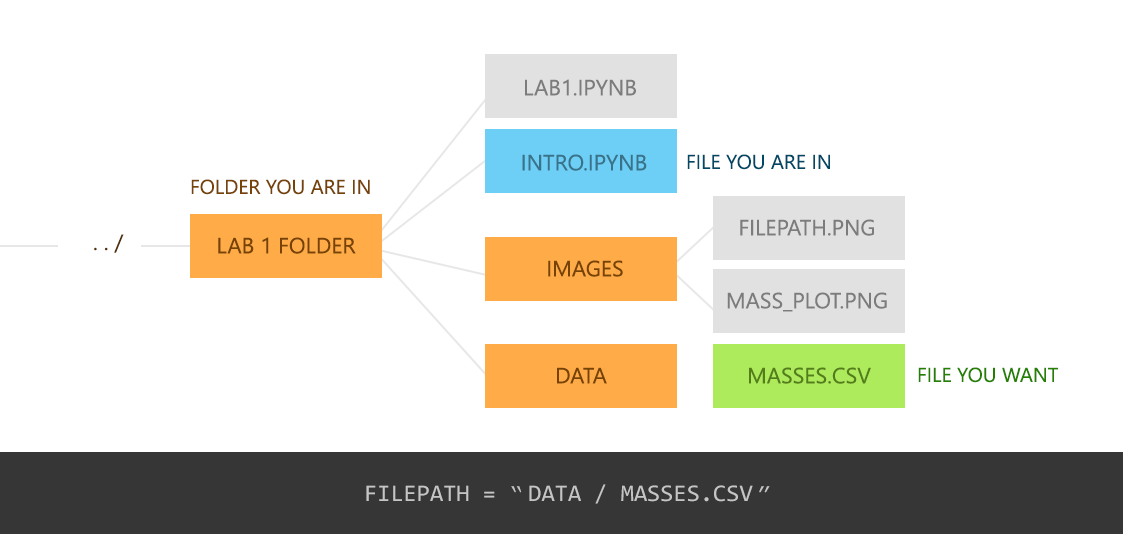
<style>
.page{position:relative;width:1123px;height:534px;background:#ffffff}
.page>*{position:absolute;margin:0}
.t1{font:22px "LeelawadeeUI";color:#7c7c7c;text-transform:uppercase}
.t2{font:22px "LeelawadeeUI";color:#397289;text-transform:uppercase}
.t3{font:20px "LeelawadeeUI";color:#004865;text-transform:uppercase}
.t4{font:20px "LeelawadeeUI";color:#764206;text-transform:uppercase}
.t5{font:22px "LeelawadeeUI";color:#513008;text-transform:uppercase}
.t6{font:22px "LeelawadeeUI";color:#764206;text-transform:uppercase}
.t7{font:22px "LeelawadeeUI";color:#537d1a;text-transform:uppercase}
.t8{font:20px "LeelawadeeUI";color:#248000;text-transform:uppercase}
.t9{font:24px "Consolas";color:#c5c5c5;text-transform:uppercase}
.t10{font:24px "CourierNewPSMT";color:#c5c5c5;text-transform:uppercase}
</style>
<div class="page">
<p class="t1" style="left:525px;top:79px;width:111px;height:17px">lab1.ipynb</p>
<p class="t2" style="left:522px;top:154px;width:125px;height:17px">intro.ipynb</p>
<p class="t3" style="left:687px;top:154px;width:143px;height:16px">File you are in</p>
<p class="t4" style="left:191px;top:179px;width:179px;height:16px">Folder you are in</p>
<p class="t1" style="left:740px;top:219px;width:134px;height:17px">filepath.png</p>
<p class="t5" style="left:94px;top:234px;width:30px;height:19px">. . /</p>
<p class="t6" style="left:218px;top:237px;width:138px;height:17px">Lab 1 Folder</p>
<p class="t6" style="left:548px;top:260px;width:75px;height:17px">ImaGes</p>
<p class="t1" style="left:727px;top:292px;width:160px;height:20px">mass_plot.png</p>
<p class="t6" style="left:557px;top:367px;width:50px;height:17px">Data</p>
<p class="t7" style="left:749px;top:367px;width:122px;height:17px">masses.csv</p>
<p class="t8" style="left:918px;top:367px;width:140px;height:16px">file you want</p>
<p class="t9" style="left:366px;top:484px;width:404px;height:20px">filepath = <span class="t10">“ </span>data / masses.csv <span class="t10">”</span></p>
</div>
